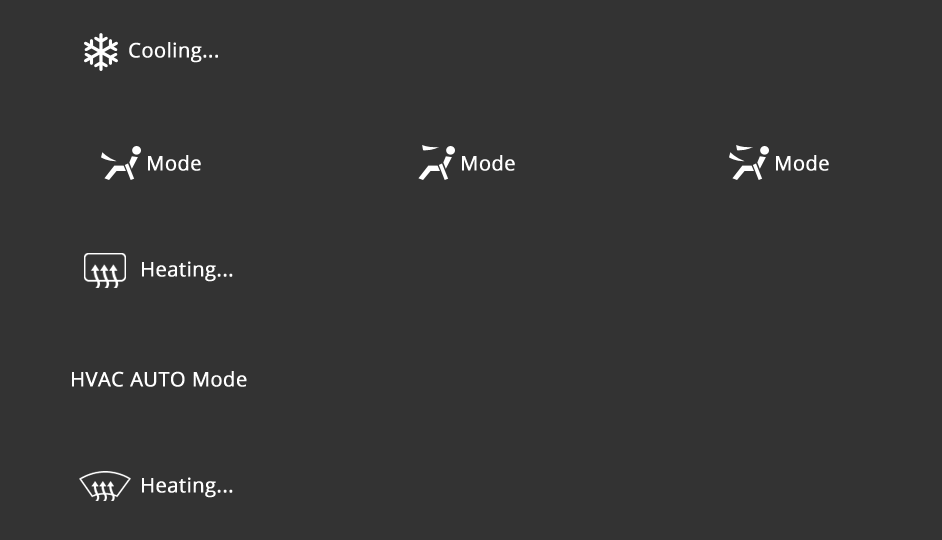
<style>
.page{position:relative;width:942px;height:540px;background:#333333}
.page>*{position:absolute;margin:0}
.t1{font:20px "OpenSans";color:#ffffff;font-weight:bold}
</style>
<div class="page">
<p class="t1" style="left:129px;top:42px;width:89px;height:21px">Cooling...</p>
<p class="t1" style="left:148px;top:155px;width:53px;height:16px">Mode</p>
<p class="t1" style="left:462px;top:155px;width:53px;height:16px">Mode</p>
<p class="t1" style="left:776px;top:155px;width:53px;height:16px">Mode</p>
<p class="t1" style="left:142px;top:261px;width:91px;height:21px">Heating...</p>
<p class="t1" style="left:72px;top:371px;width:175px;height:16px">HVAC AUTO Mode</p>
<p class="t1" style="left:142px;top:477px;width:91px;height:21px">Heating...</p>
</div>
